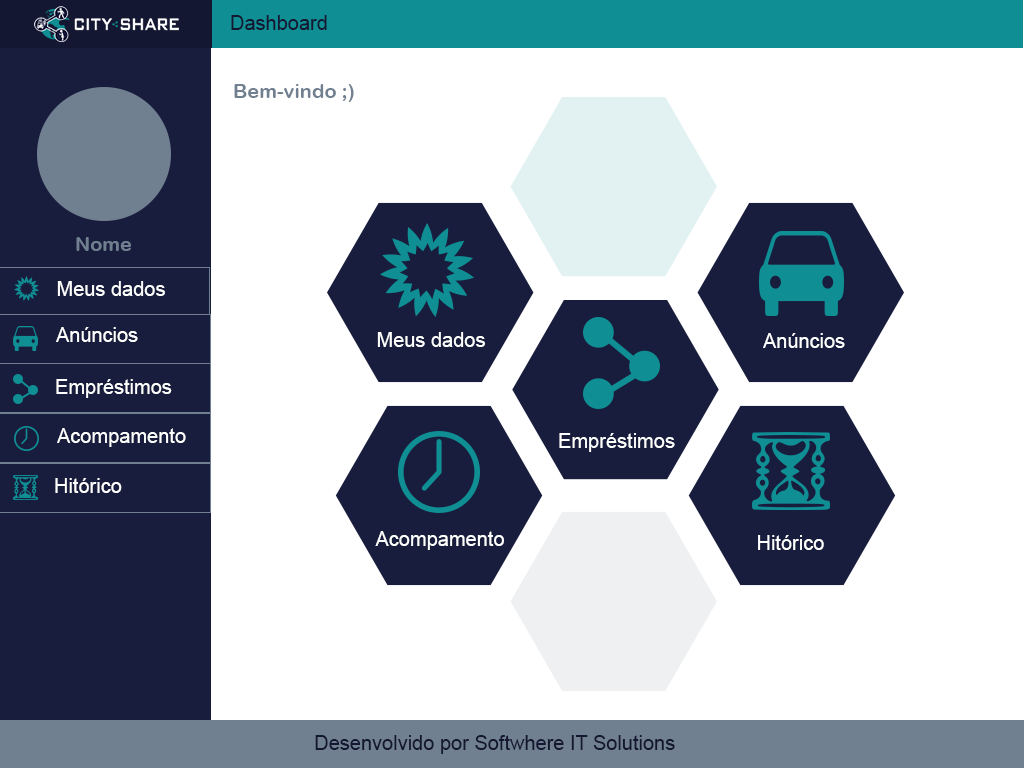
<style>
.page{position:relative;width:1024px;height:768px;background:#ffffff}
.page>*{position:absolute;margin:0}
.t1{font:20px "ArialMT";color:#141731}
.t2{font:20px "ArialRoundedMTBold";color:#708090}
.t3{font:20px "ArialMT";color:#feffff}
.t4{font:20.3px "ArialMT";color:#feffff}
</style>
<div class="page">
<p class="t1" style="left:231px;top:15px;width:96px;height:15px">Dashboard</p>
<p class="t2" style="left:234px;top:84px;width:120px;height:18px">Bem-vindo ;)</p>
<p class="t2" style="left:76px;top:237px;width:55px;height:14px">Nome</p>
<p class="t3" style="left:57px;top:281px;width:108px;height:15px">Meus dados</p>
<p class="t4" style="left:56px;top:327px;width:82px;height:15px">Anúncios</p>
<p class="t3" style="left:377px;top:332px;width:108px;height:15px">Meus dados</p>
<p class="t4" style="left:763px;top:333px;width:82px;height:15px">Anúncios</p>
<p class="t3" style="left:56px;top:379px;width:116px;height:19px">Empréstimos</p>
<p class="t4" style="left:57px;top:428px;width:129px;height:19px">Acompamento</p>
<p class="t4" style="left:559px;top:433px;width:116px;height:19px">Empréstimos</p>
<p class="t3" style="left:55px;top:478px;width:67px;height:15px">Hitórico</p>
<p class="t4" style="left:375px;top:531px;width:129px;height:19px">Acompamento</p>
<p class="t3" style="left:758px;top:535px;width:66px;height:15px">Hitórico</p>
<p class="t1" style="left:315px;top:735px;width:360px;height:19px">Desenvolvido por Softwhere IT Solutions</p>
</div>
